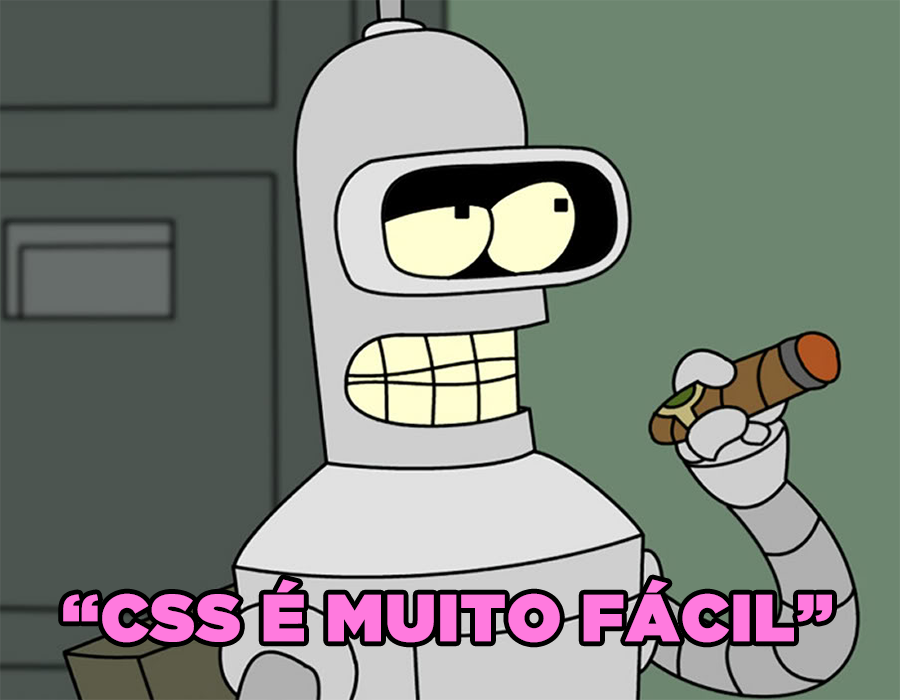
<style>
.page{position:relative;width:900px;height:700px;background:#6d8670}
.page>*{position:absolute;margin:0}
.t1{font:66.1px "GothamUltra";color:#ff7ade;font-weight:bold}
</style>
<div class="page">
<p class="t1" style="left:63px;top:579px;width:769px;height:64px">“CSS É MUITO FÁCIL”</p>
</div>
